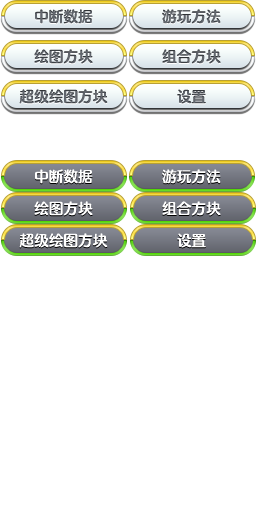
<style>
.page{position:relative;width:256px;height:512px;background:#ffffff}
.page>*{position:absolute;margin:0}
.t1{font:14.7px "FZFW-QingYinTiS-B--GB1-0";color:#61666d}
.t2{font:14.7px "FZFW-QingYinTiS-B--GB1-0";color:#55595f}
.t3{font:14.7px "FZFW-QingYinTiS-B--GB1-0";color:#ffffff}
</style>
<div class="page">
<p class="t1" style="left:35px;top:9px;width:58px;height:15px">中断数据</p>
<p class="t1" style="left:162px;top:9px;width:59px;height:15px">游玩方法</p>
<p class="t1" style="left:34px;top:49px;width:59px;height:15px">绘图方块</p>
<p class="t1" style="left:162px;top:49px;width:59px;height:15px">组合方块</p>
<p class="t1" style="left:19px;top:89px;width:89px;height:15px">超级绘图方块</p>
<p class="t2" style="left:177px;top:89px;width:29px;height:15px">设置</p>
<p class="t3" style="left:35px;top:169px;width:58px;height:15px">中断数据</p>
<p class="t3" style="left:162px;top:169px;width:59px;height:15px">游玩方法</p>
<p class="t3" style="left:34px;top:201px;width:59px;height:15px">绘图方块</p>
<p class="t3" style="left:162px;top:201px;width:59px;height:15px">组合方块</p>
<p class="t3" style="left:19px;top:233px;width:89px;height:15px">超级绘图方块</p>
<p class="t3" style="left:177px;top:233px;width:29px;height:15px">设置</p>
</div>
